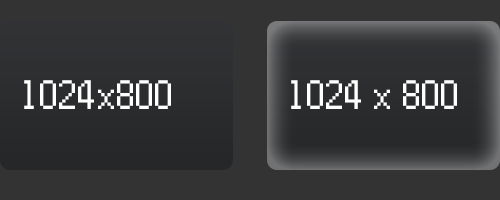
<style>
.page{position:relative;width:500px;height:200px;background:#333333}
.page>*{position:absolute;margin:0}
.t1{font:41.7px "Power-Green";color:#ffffff}
</style>
<div class="page">
<p class="t1" style="left:24px;top:80px;width:147px;height:29px">1024x800</p>
<p class="t1" style="left:291px;top:80px;width:166px;height:29px">1024 x 800</p>
</div>
